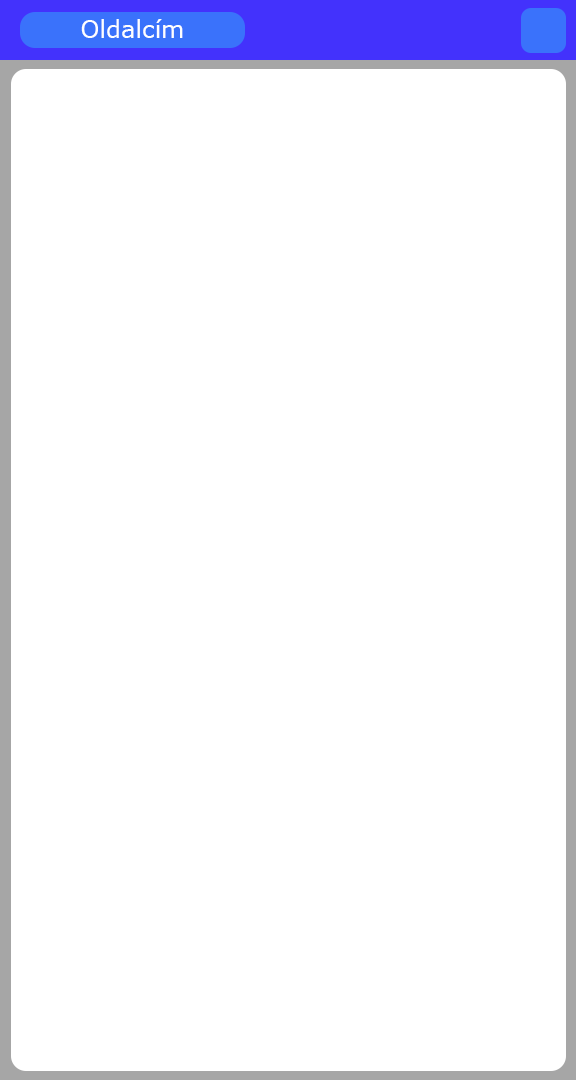
<style>
.page{position:relative;width:576px;height:1080px;background:#ffffff}
.page>*{position:absolute;margin:0}
.t1{font:24px "Verdana";color:#fefefe}
</style>
<div class="page">
<p class="t1" style="left:81px;top:19px;width:102px;height:19px">Oldalcím</p>
</div>
